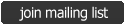
<style>
.page{position:relative;width:125px;height:25px;background:#353535}
.page>*{position:absolute;margin:0}
.t1{font:14.5px "Tahoma";letter-spacing:-0.03em;color:#ffffff}
</style>
<div class="page">
<p class="t1" style="left:19px;top:6px;width:89px;height:15px">join mailing list</p>
</div>
